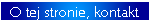
<style>
.page{position:relative;width:150px;height:22px;background:#ffffff}
.page>*{position:absolute;margin:0}
.t1{font:14px "CGOmega";color:#ffffff}
</style>
<div class="page">
<p class="t1" style="left:10px;top:6px;width:129px;height:14px">O tej stronie, kontakt</p>
</div>
